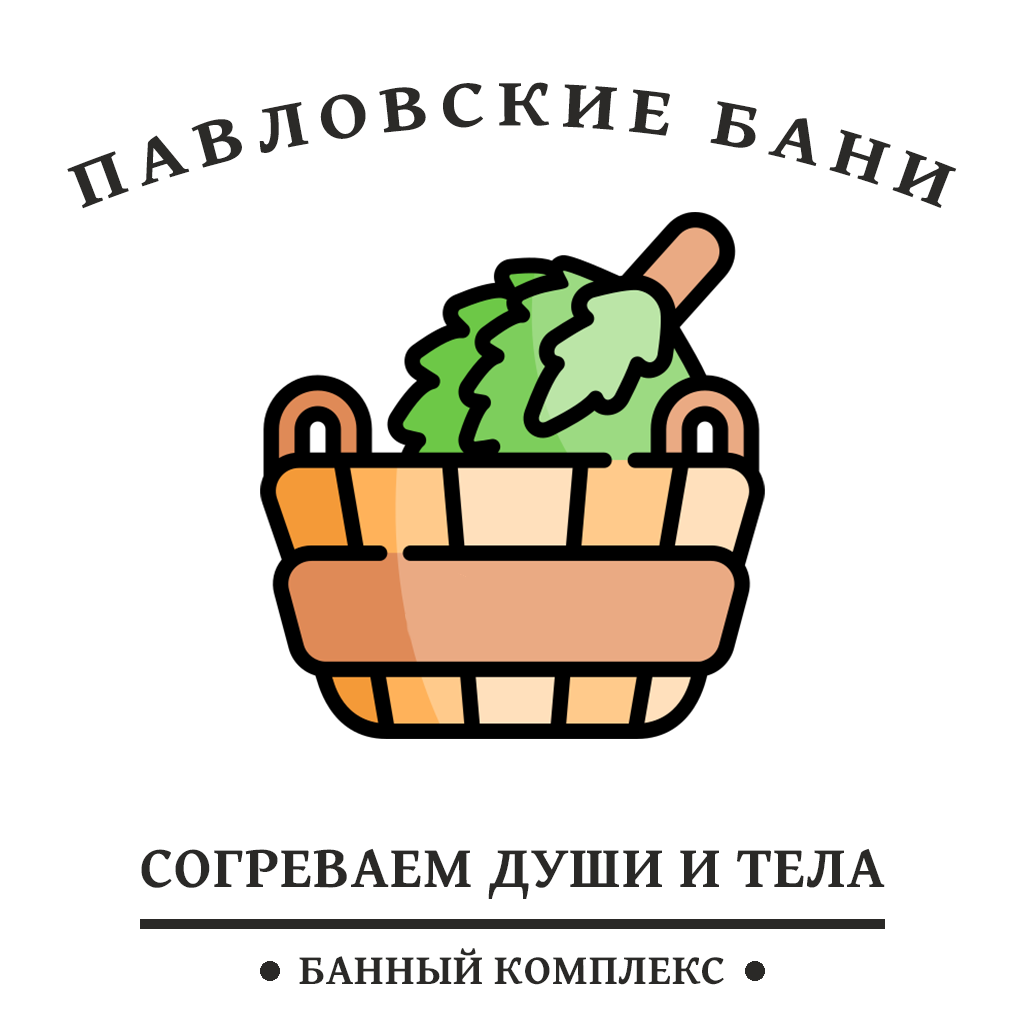
<style>
.page{position:relative;width:1024px;height:1024px;background:#ffffff}
.page>*{position:absolute;margin:0}
.t1{font:68.2px "GentiumBookPlus-Bold";letter-spacing:0.16em;color:#2b2a28}
.t2{font:59.4px "GentiumBookPlus-Bold";letter-spacing:0.02em;color:#2a2927}
.t3{font:42.9px "GentiumBookPlus-Bold";letter-spacing:0.02em;color:#2a2927}
</style>
<div class="page">
<p class="t1" style="left:67px;top:82px;width:890px;height:127px;text-align:center">ПАВЛОВСКИЕ БАНИ</p>
<p class="t2" style="left:141px;top:848px;width:744px;height:51px">СОГРЕВАЕМ ДУШИ И ТЕЛА</p>
<p class="t3" style="left:299px;top:948px;width:425px;height:37px">БАННЫЙ КОМПЛЕКС</p>
</div>
